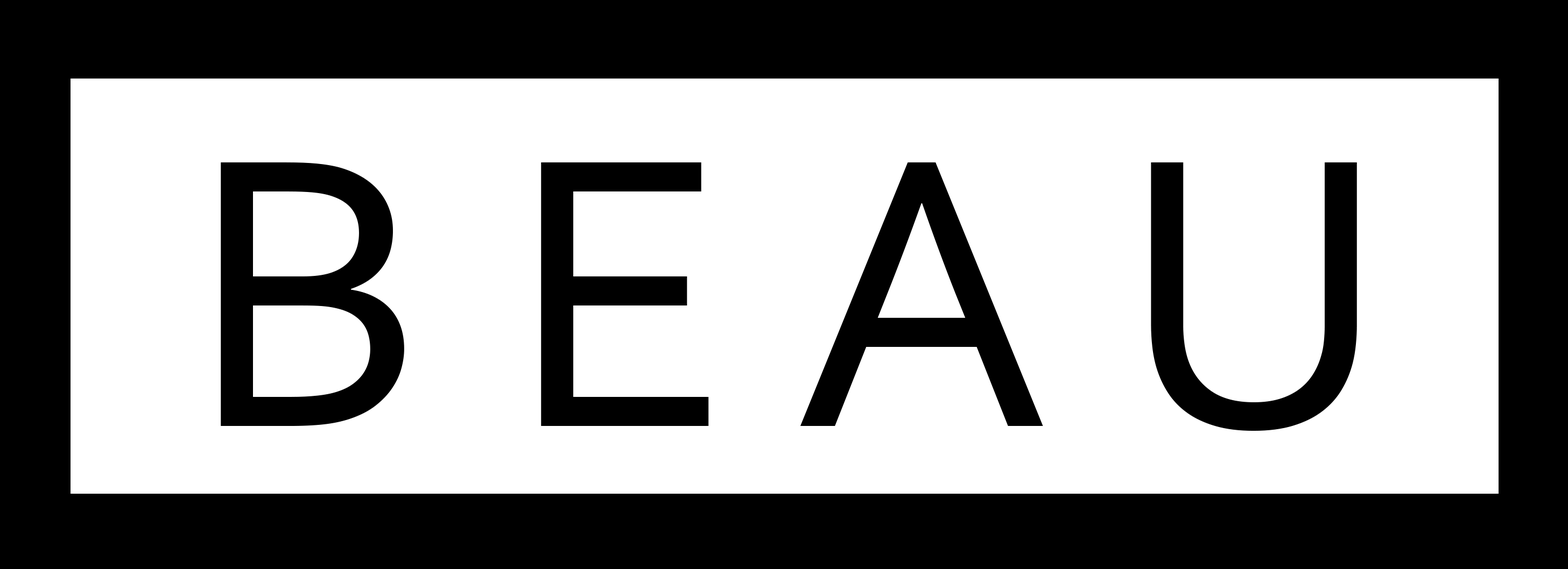
<style>
.page{position:relative;width:1568px;height:569px;background:#ffffff}
.page>*{position:absolute;margin:0}
.t1{font:403.7px "Corbel";color:#000000}
</style>
<div class="page">
<p class="t1" style="left:221px;top:162px;width:1136px;height:269px">B E A U</p>
</div>
